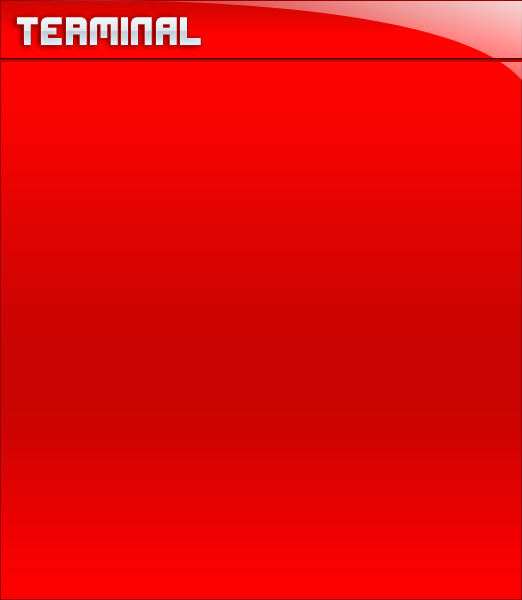
<style>
.page{position:relative;width:522px;height:600px}
.page>*{position:absolute;margin:0}
.t1{font:35.5px "Xifiction";color:#e2ebf0}
</style>
<div class="page">
<p class="t1" style="left:17px;top:17px;width:184px;height:28px">terminal</p>
</div>
